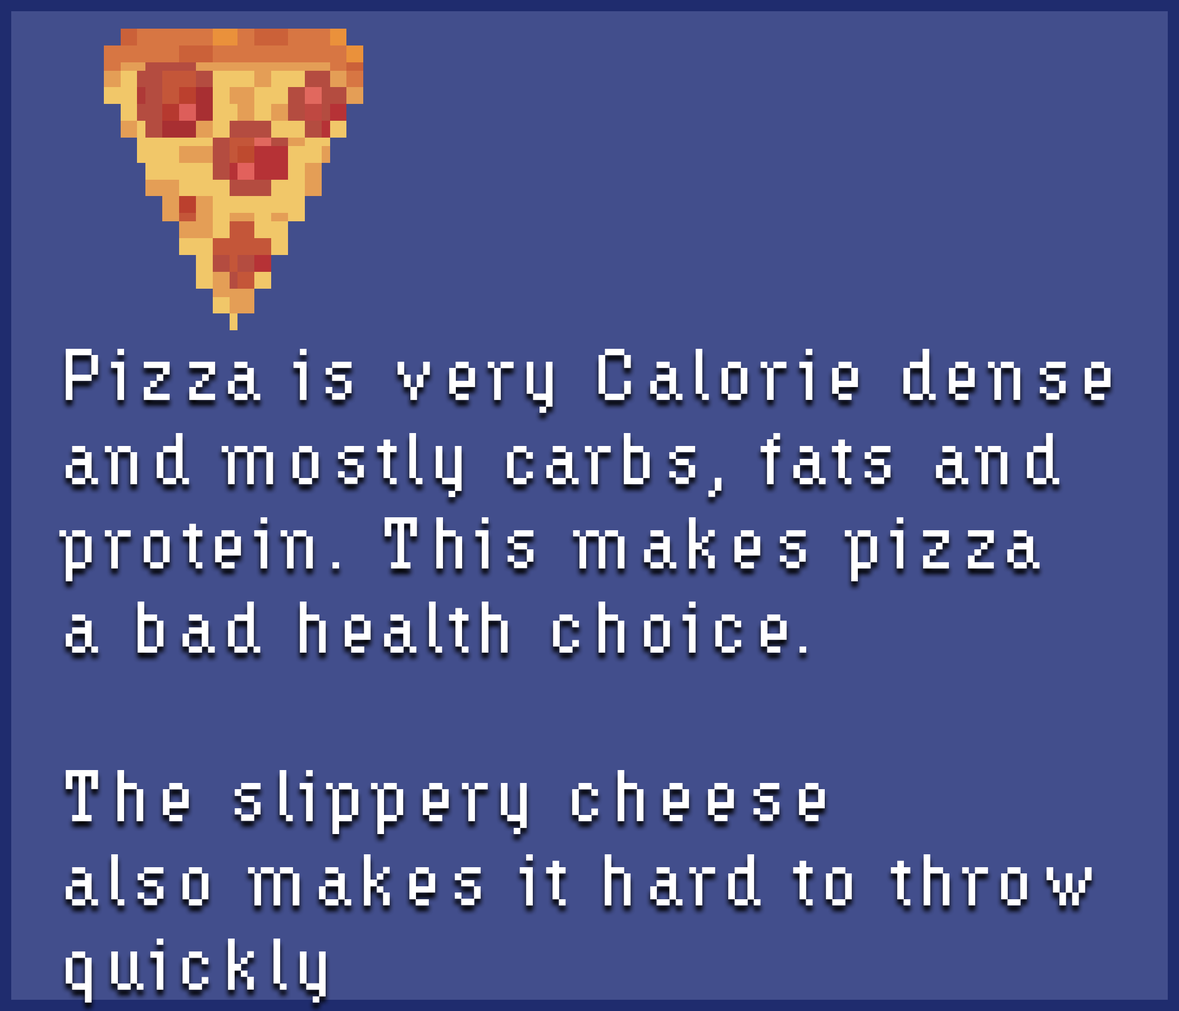
<style>
.page{position:relative;width:1179px;height:1011px;background:#424e8c}
.page>*{position:absolute;margin:0}
.t1{font:70.2px "HydrophiliaIced";letter-spacing:0.1em;color:#ffffff}
</style>
<div class="page">
<p class="t1" style="left:59px;top:349px;width:1052px;height:654px">Pizza is very Calorie dense<br>and mostly carbs, fats and <br>protein. This makes pizza<br>a bad health choice.<br><br>The slippery cheese<br>also makes it hard to throw<br>quickly</p>
</div>
